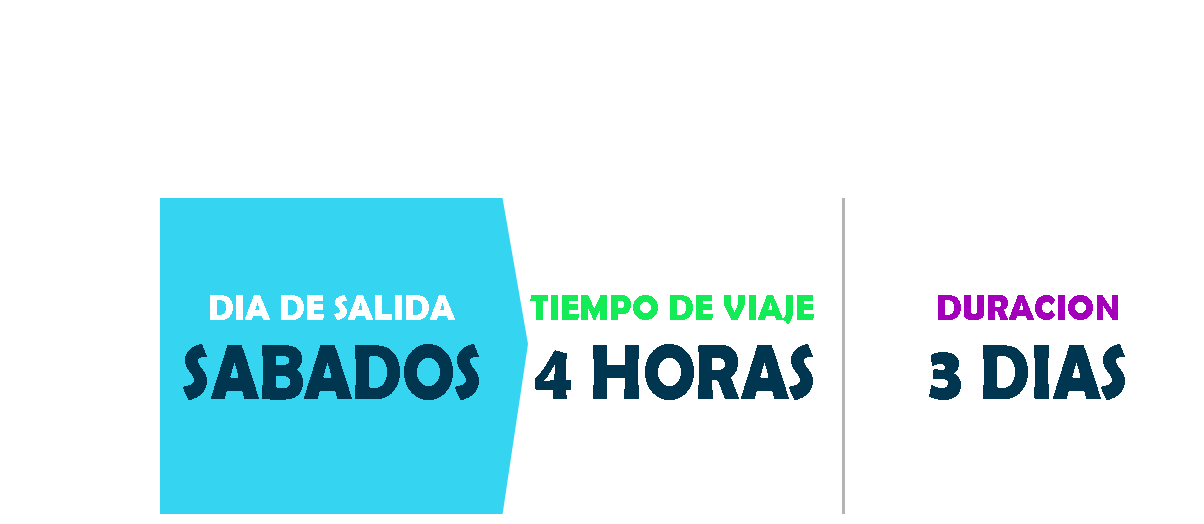
<style>
.page{position:relative;width:1204px;height:524px;background:#ffffff}
.page>*{position:absolute;margin:0}
.t1{font:36px "BerlinSansFBDemi-Bold";color:#ffffff}
.t2{font:36px "BerlinSansFBDemi-Bold";color:#13ec56}
.t3{font:36px "BerlinSansFBDemi-Bold";color:#a400bc}
.t4{font:78.9px "BerlinSansFBDemi-Bold";color:#00364f;scale:0.89 1}
</style>
<div class="page">
<p class="t1" style="left:210px;top:295px;width:245px;height:25px">DIA DE SALIDA</p>
<p class="t2" style="left:530px;top:295px;width:284px;height:29px">TIEMPO DE VIAJE</p>
<p class="t3" style="left:938px;top:295px;width:180px;height:25px">DURACION</p>
<p class="t4" style="left:183px;top:344px;width:296px;height:56px">SABADOS</p>
<p class="t4" style="left:535px;top:344px;width:278px;height:56px">4 HORAS</p>
<p class="t4" style="left:929px;top:344px;width:196px;height:56px">3 DIAS</p>
</div>
